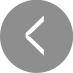
<style>
.page{position:relative;width:73px;height:73px;background:#8e8e8e}
.page>*{position:absolute;margin:0}
.t1{font:94.9px "Roboto-Light";color:#ffffff;scale:0.47 1}
</style>
<div class="page">
<p class="t1" style="left:25px;top:15px;width:19px;height:41px">&lt;</p>
</div>
